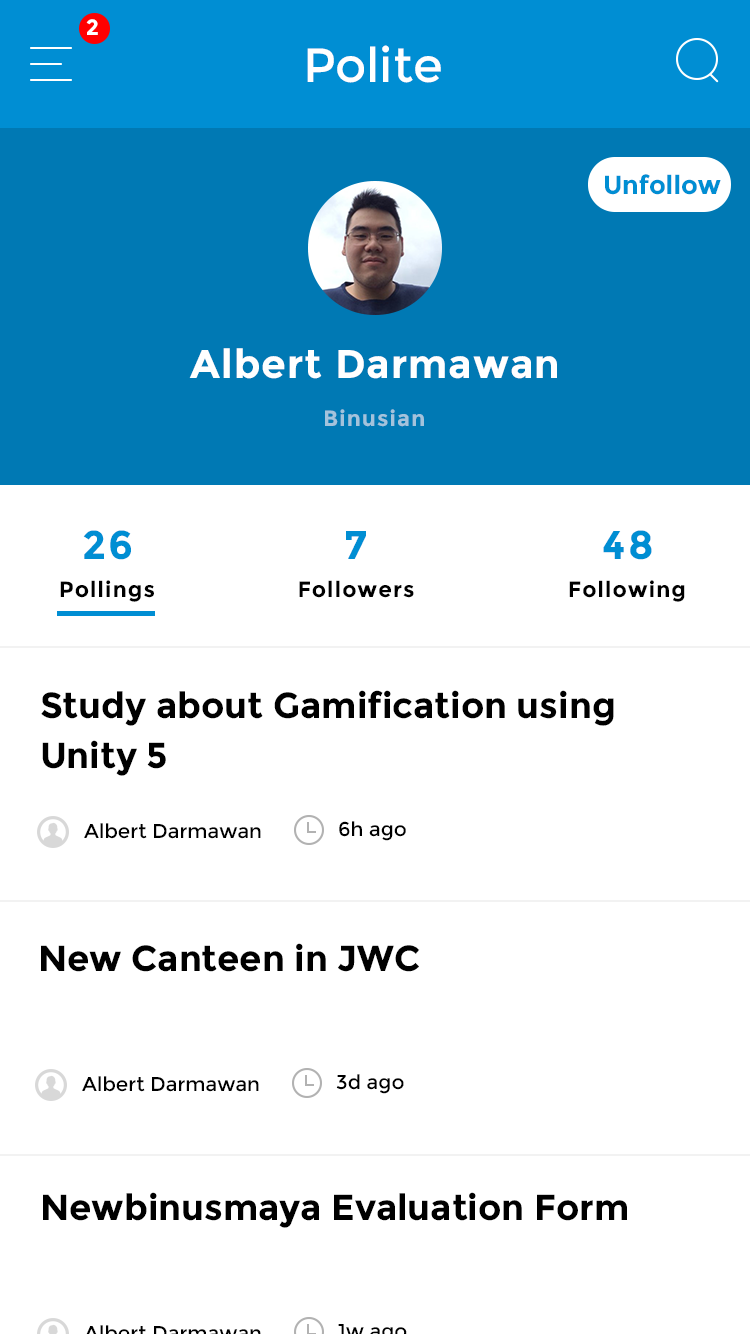
<style>
.page{position:relative;width:750px;height:1334px;background:#ffffff}
.page>*{position:absolute;margin:0}
.t1{font:22px "Montserrat-Bold";letter-spacing:0.05em;color:#ffffff}
.t2{font:48px "Montserrat-Regular";color:#ffffff}
.t3{font:26px "Montserrat-Bold";color:#008ed3}
.t4{font:40px "Montserrat-Bold";letter-spacing:0.024em;color:#ffffff}
.t5{font:22px "Montserrat-Bold";letter-spacing:0.05em;color:#a3c3dc}
.t6{font:40px "Montserrat-Bold";letter-spacing:0.05em;color:#008ed3}
.t7{font:22px "Montserrat-Bold";letter-spacing:0.05em;color:#000000}
.t8{font:36px/50px "Montserrat-Bold";color:#000000}
.t9{font:20px "Montserrat-Regular";color:#000000}
.t10{font:36px "Montserrat-Bold";color:#000000}
</style>
<div class="page">
<p class="t1" style="left:86px;top:19px;width:12px;height:16px">2</p>
<p class="t2" style="left:307px;top:45px;width:134px;height:38px">Polite</p>
<p class="t3" style="left:605px;top:174px;width:116px;height:21px">Unfollow</p>
<p class="t4" style="left:189px;top:348px;width:368px;height:31px">Albert Darmawan</p>
<p class="t5" style="left:325px;top:409px;width:99px;height:18px">Binusian</p>
<p class="t6" style="left:83px;top:530px;width:48px;height:30px">26</p>
<p class="t6" style="left:346px;top:531px;width:20px;height:28px">7</p>
<p class="t6" style="left:603px;top:530px;width:49px;height:30px">48</p>
<p class="t7" style="left:60px;top:580px;width:94px;height:22px">Pollings</p>
<p class="t7" style="left:299px;top:580px;width:115px;height:18px">Followers</p>
<p class="t7" style="left:569px;top:580px;width:116px;height:22px">Following</p>
<p class="t8" style="left:41px;top:690px;width:573px;height:86px">Study about Gamification using <br>Unity 5</p>
<p class="t9" style="left:339px;top:821px;width:67px;height:20px">6h ago</p>
<p class="t9" style="left:84px;top:823px;width:177px;height:16px">Albert Darmawan</p>
<p class="t10" style="left:41px;top:943px;width:379px;height:29px">New Canteen in JWC</p>
<p class="t9" style="left:82px;top:1076px;width:177px;height:16px">Albert Darmawan</p>
<p class="t9" style="left:336px;top:1074px;width:68px;height:20px">3d ago</p>
<p class="t10" style="left:43px;top:1192px;width:584px;height:36px">Newbinusmaya Evaluation Form</p>
</div>
